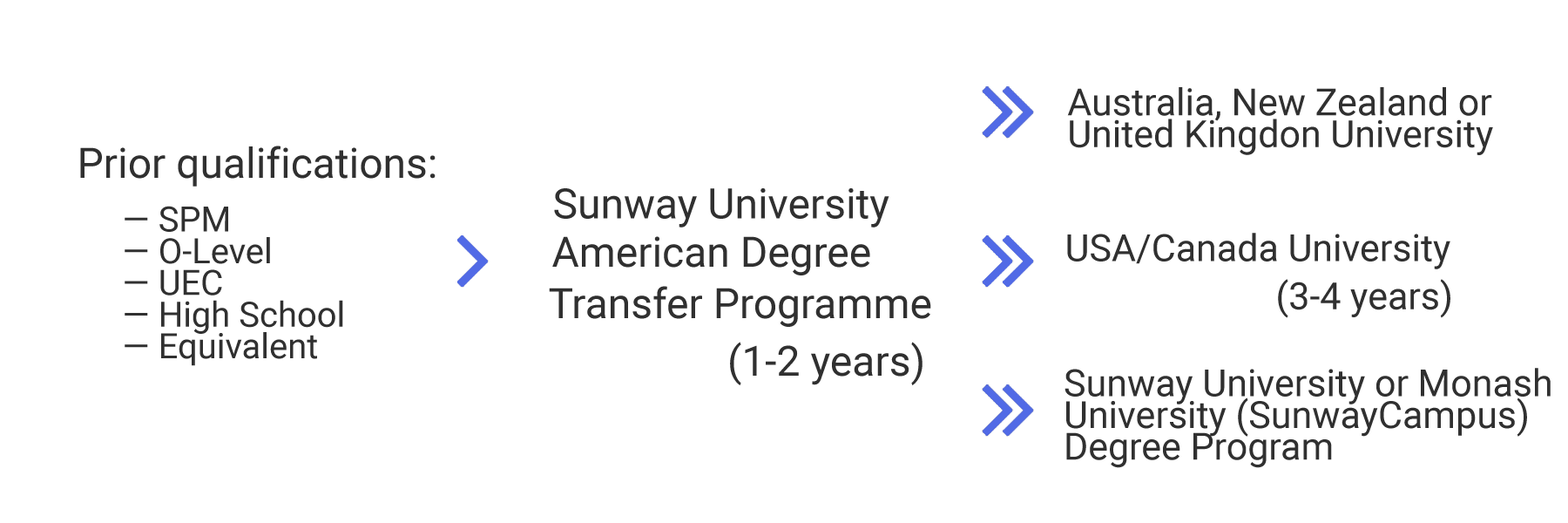
<style>
.page{position:relative;width:1568px;height:523px;background:#ffffff}
.page>*{position:absolute;margin:0}
.t1{font:37.5px/31.7px "Roboto-Regular";color:#303030}
.t2{font:41.8px "Roboto-Regular";color:#303030}
.t3{font:34.8px/31.7px "Roboto-Regular";color:#303030}
.t4{font:37.5px "Roboto-Regular";color:#303030}
</style>
<div class="page">
<p class="t1" style="left:1067px;top:87px;width:426px;height:68px">Australia, New Zealand or<br>United Kingdon University</p>
<p class="t2" style="left:80px;top:145px;width:356px;height:41px">Prior qualifications:</p>
<p class="t2" style="left:554px;top:188px;width:335px;height:39px">Sunway University</p>
<p class="t3" style="left:125px;top:206px;width:218px;height:160px">— SPM<br>— O-Level<br>— UEC<br>— High School<br>— Equivalent</p>
<p class="t4" style="left:1067px;top:233px;width:383px;height:36px">USA/Canada University</p>
<p class="t2" style="left:552px;top:236px;width:318px;height:39px">American Degree</p>
<p class="t4" style="left:1278px;top:279px;width:172px;height:39px">(3-4 years)</p>
<p class="t2" style="left:549px;top:286px;width:382px;height:41px">Transfer Programme</p>
<p class="t2" style="left:730px;top:341px;width:193px;height:44px">(1-2 years)</p>
<p class="t1" style="left:1064px;top:368px;width:487px;height:100px">Sunway University or Monash<br>University (SunwayCampus) <br>Degree Program</p>
</div>
